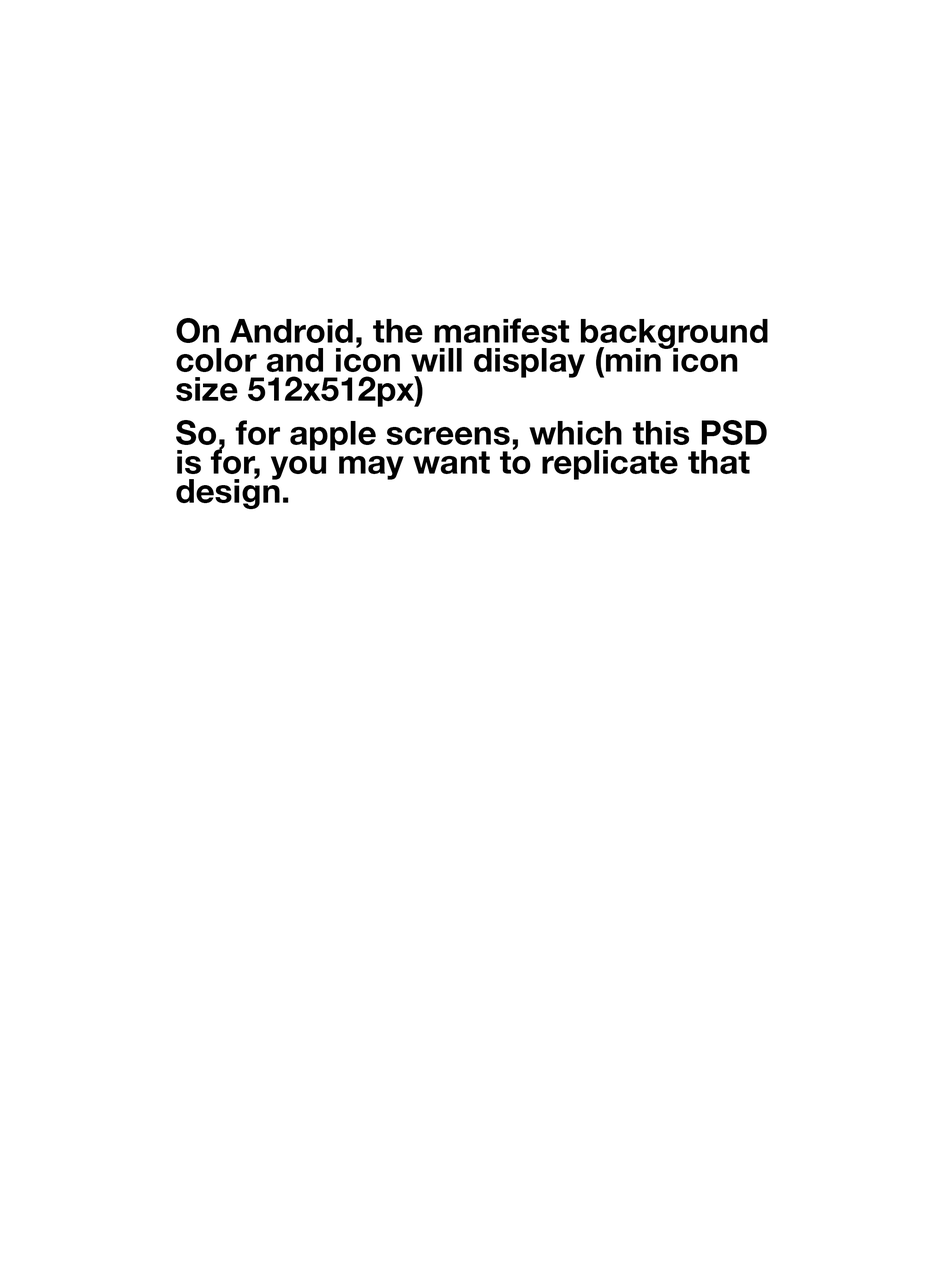
<style>
.page{position:relative;width:945px;height:1261px;background:#ffffff}
.page>*{position:absolute;margin:0}
.t1{font:33.2px/14.5px "HelveticaNeue-Bold";color:#000000}
</style>
<div class="page">
<p class="t1" style="left:176px;top:318px;width:592px;height:191px">On Android, the manifest background<br><br>color and icon will display (min icon<br><br>size 512x512px)<br><br><br>So, for apple screens, which this PSD <br><br>is for, you may want to replicate that <br><br>design.</p>
</div>
